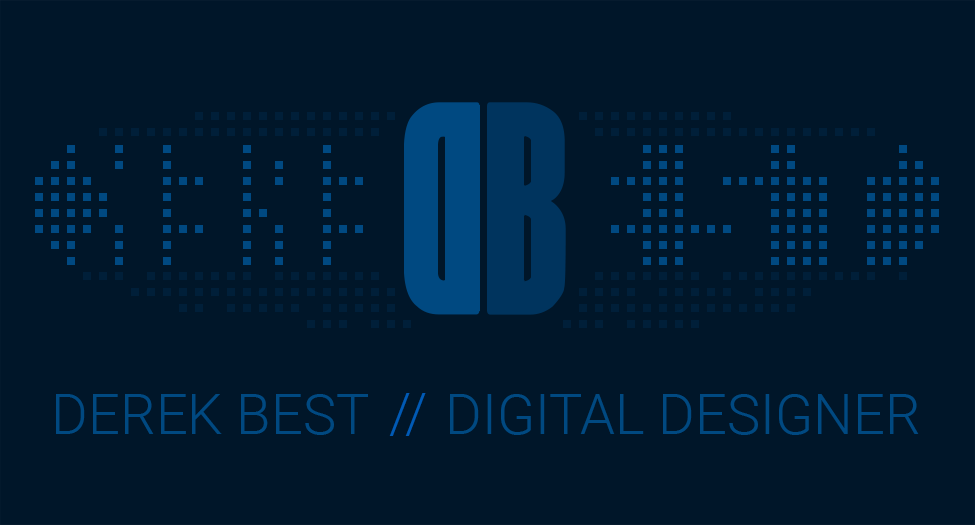
<style>
.page{position:relative;width:975px;height:525px;background:#001629}
.page>*{position:absolute;margin:0}
.t1{font:56px "Roboto-Light";color:#004981}
.t2{font:56px "Roboto-Light";color:#005ab5}
</style>
<div class="page">
<p class="t1" style="left:56px;top:394px;width:312px;height:41px">DEREK BEST</p>
<p class="t2" style="left:389px;top:393px;width:37px;height:43px">//</p>
<p class="t1" style="left:450px;top:394px;width:469px;height:41px">DIGITAL DESIGNER</p>
</div>
